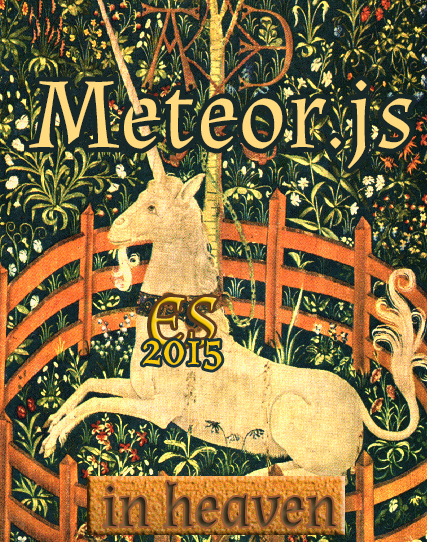
<style>
.page{position:relative;width:427px;height:542px}
.page>*{position:absolute;margin:0}
.t1{font:100px "Almendra-Regular";color:#ffda7f}
.t2{font:72px "Almendra-Regular"}
.t3{font:48px "Almendra-Regular";color:#fbca08}
.t4{font:60px "Almendra-Regular"}
</style>
<div class="page">
<p class="t1" style="left:29px;top:80px;width:383px;height:89px">Meteor.js</p>
<p class="t2" style="left:150px;top:297px;width:67px;height:50px">ES</p>
<p class="t3" style="left:142px;top:340px;width:80px;height:30px">2015</p>
<p class="t4" style="left:104px;top:481px;width:232px;height:46px">in heaven</p>
</div>
